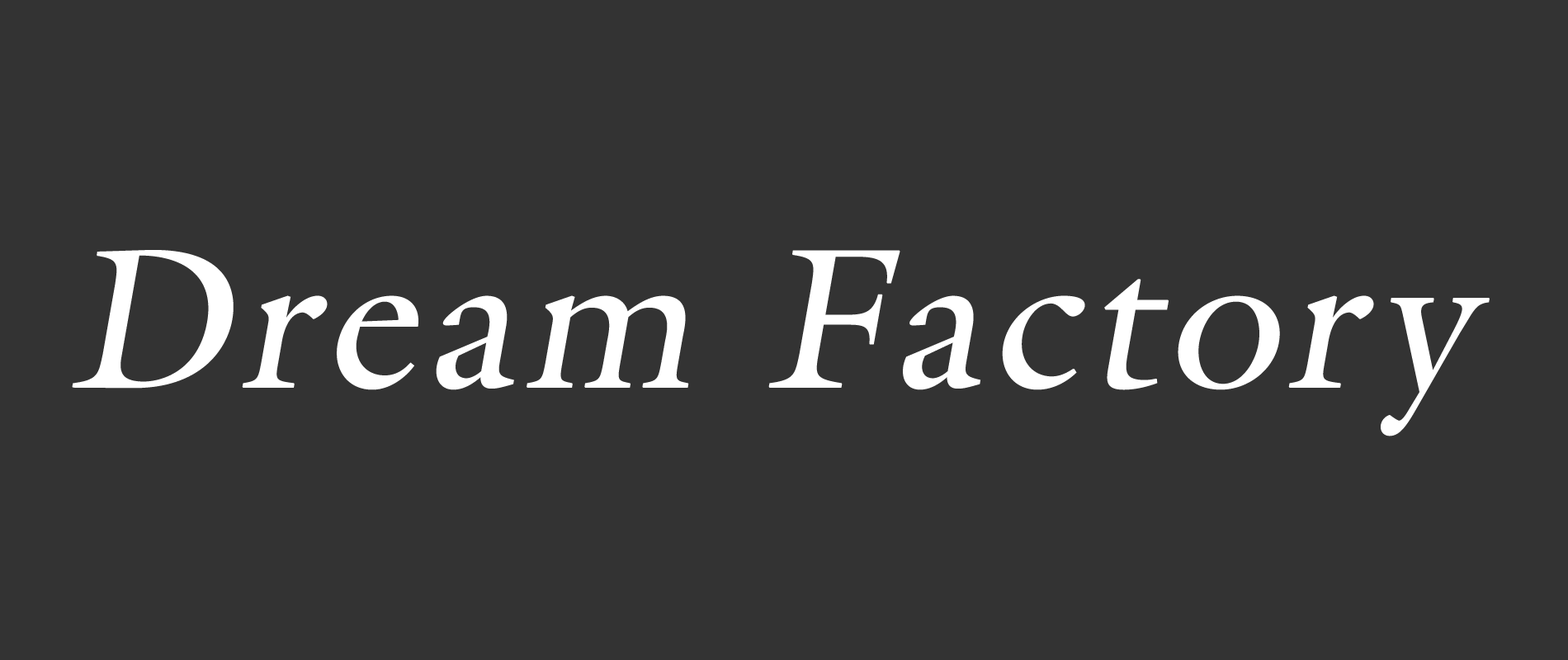
<style>
.page{position:relative;width:1568px;height:660px;background:#333333}
.page>*{position:absolute;margin:0}
.t1{font:199.7px "GalliardPro-Roman";letter-spacing:0.02em;color:#ffffff;font-weight:bold;font-style:italic}
</style>
<div class="page">
<p class="t1" style="left:72px;top:250px;width:1418px;height:187px">Dream Factory</p>
</div>
